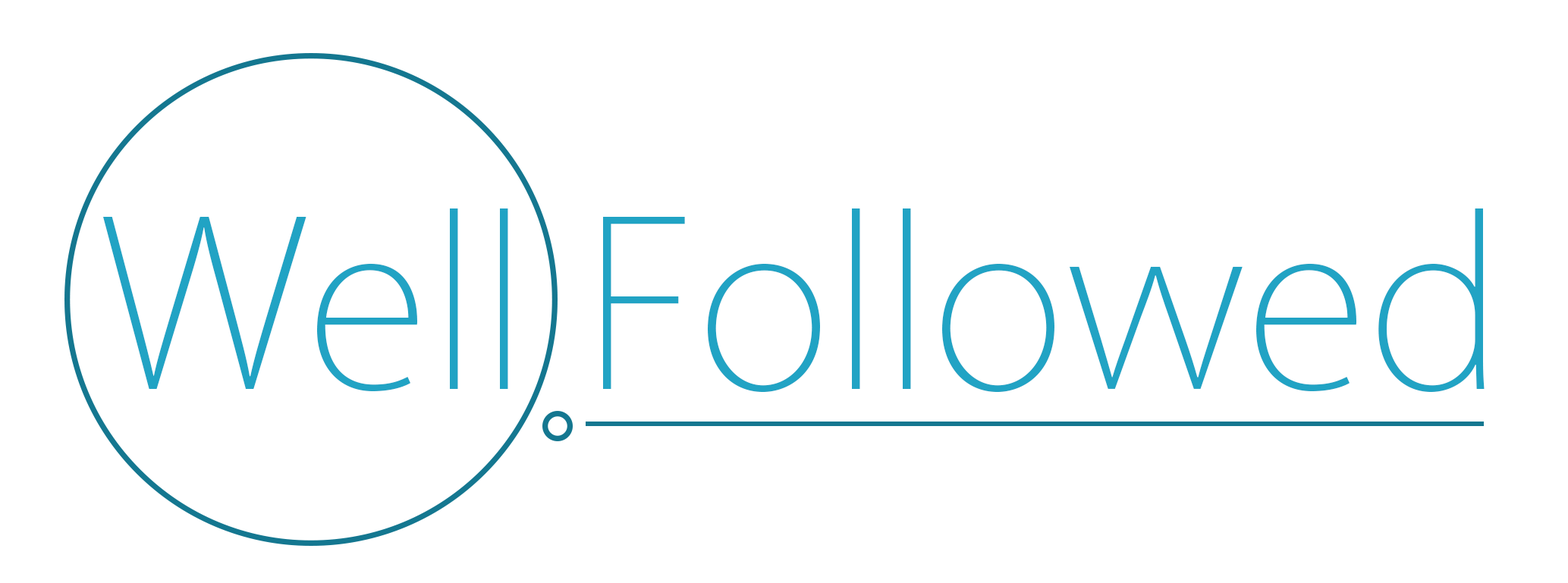
<style>
.page{position:relative;width:1568px;height:583px;background:#ffffff}
.page>*{position:absolute;margin:0}
.t1{font:227.6px "KozGoPr6N-ExtraLight";color:#21a3c4}
</style>
<div class="page">
<p class="t1" style="left:103px;top:209px;width:1382px;height:184px">Well Followed</p>
</div>
